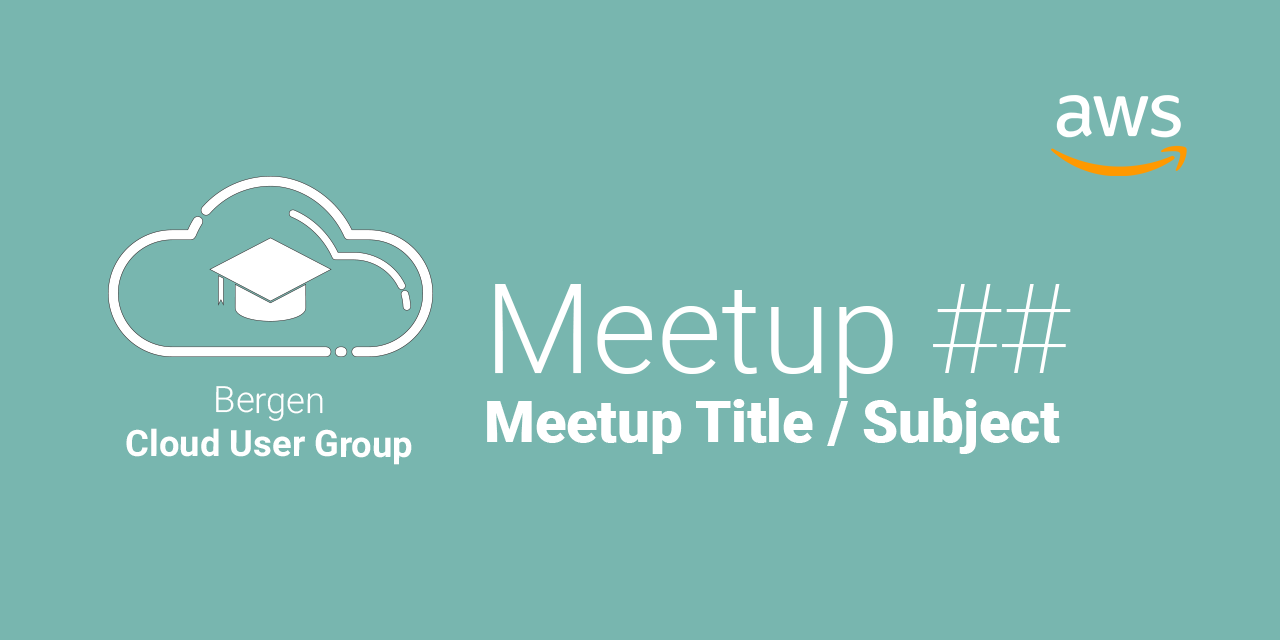
<style>
.page{position:relative;width:1280px;height:640px;background:#78b6af}
.page>*{position:absolute;margin:0}
.t1{font:57.5px "Roboto-Black";color:#ffffff}
.t2{font:124.9px "Roboto-Light";color:#ffffff}
.t3{font:124.9px "Roboto-Thin";color:#ffffff}
.t4{font:36.4px "Roboto-Bold";color:#ffffff}
.t5{font:36.4px "Roboto-Light";color:#ffffff}
</style>
<div class="page">
<p class="t1" style="left:487px;top:284px;width:584px;height:170px"><span class="t2">Meetup </span><span class="t3">##<br></span>Meetup Title / Subject</p>
<p class="t4" style="left:126px;top:386px;width:286px;height:79px;text-align:center"><span class="t5">Bergen<br></span>Cloud User Group</p>
</div>
